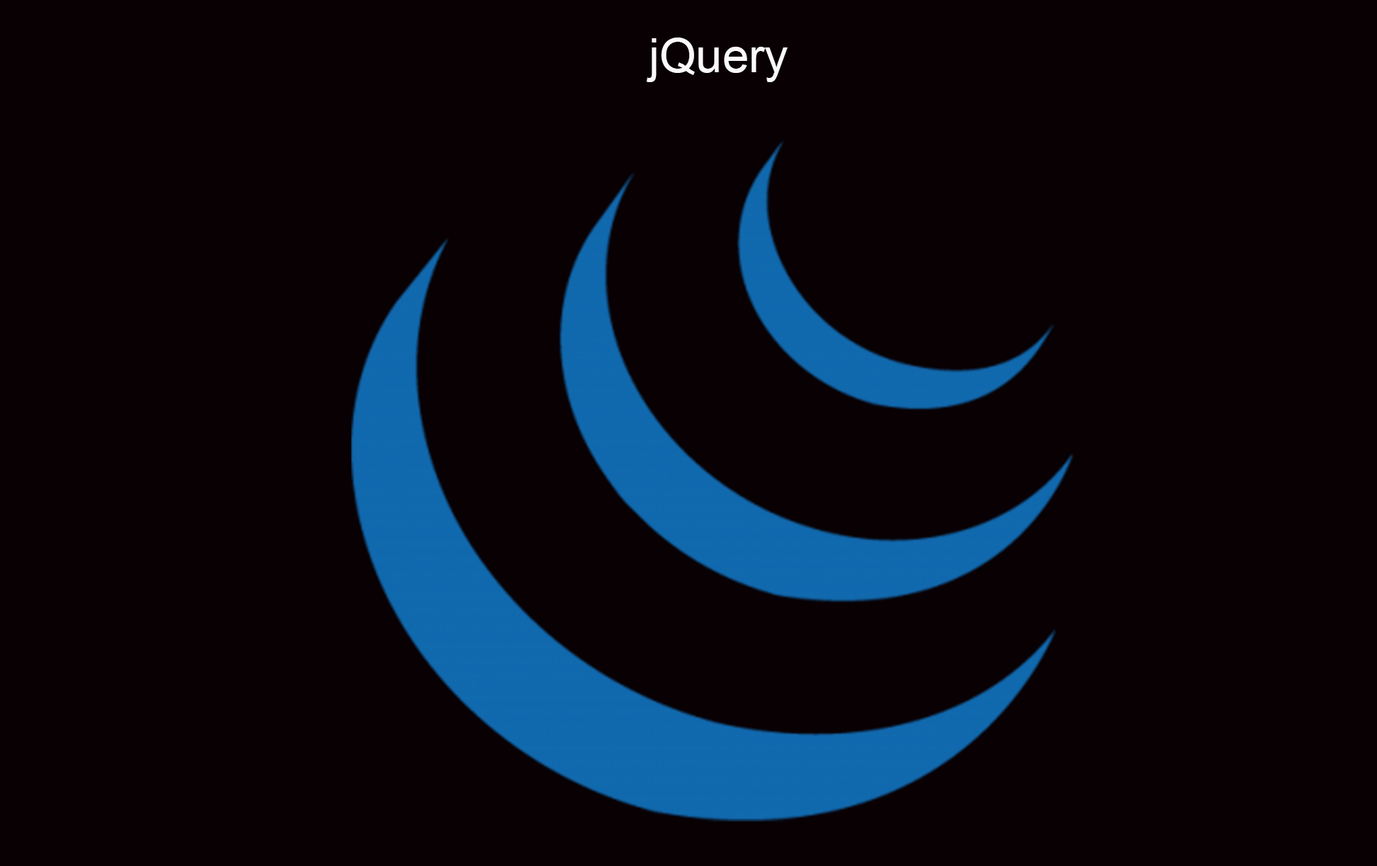
<style>
.page{position:relative;width:1377px;height:866px;background:#080003}
.page>*{position:absolute;margin:0}
.t1{font:47.2px "ArialMT";color:#fcf9fb}
</style>
<div class="page">
<p class="t1" style="left:646px;top:38px;width:142px;height:44px">jQuery</p>
</div>
